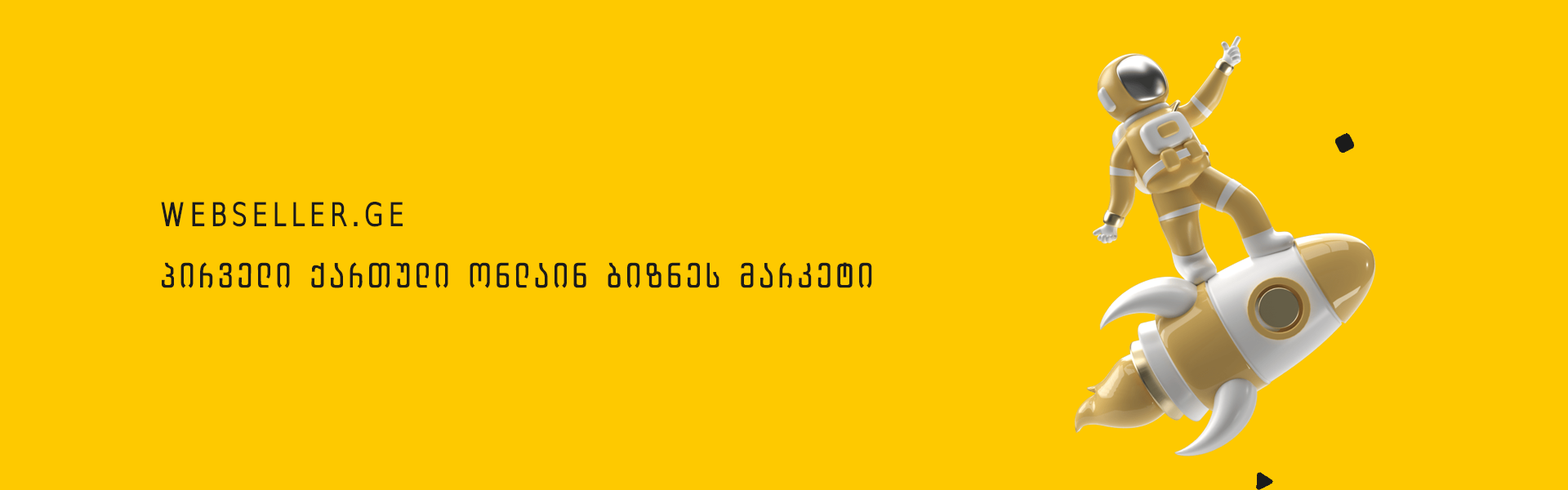
<style>
.page{position:relative;width:1568px;height:490px;background:#fec900}
.page>*{position:absolute;margin:0}
.t1{font:32.7px/20.4px "BPGTech05Caps";letter-spacing:0.12em;color:#1b1b1b;text-transform:uppercase}
</style>
<div class="page">
<p class="t1" style="left:161px;top:202px;width:711px;height:86px">WEBSELLER.GE<br><br><br>პირველი ქართული ონლაინ ბიზნეს მარკეტი</p>
</div>
